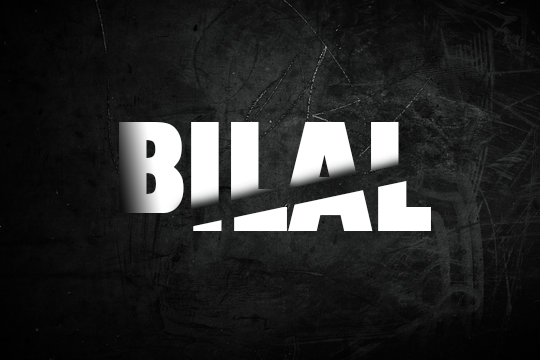
<style>
.page{position:relative;width:540px;height:360px}
.page>*{position:absolute;margin:0}
.t1{font:121.7px "GillSans-UltraBoldCondensed"}
.t2{font:125px "GillSans-UltraBoldCondensed"}
</style>
<div class="page">
<p class="t1" style="left:119px;top:122px;width:304px;height:91px">BILAL</p>
<p class="t2" style="left:119px;top:138px;width:312px;height:93px">BILAL</p>
</div>
